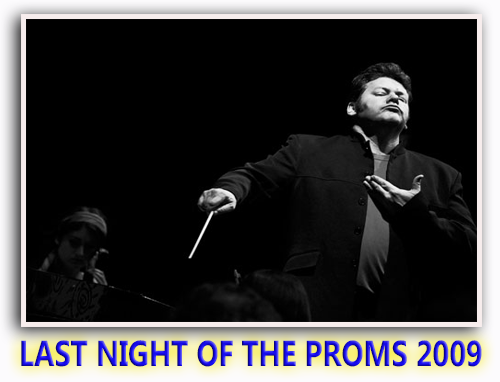
<style>
.page{position:relative;width:500px;height:382px;background:#000000}
.page>*{position:absolute;margin:0}
.t1{font:36px "MicrosoftPhagsPa-Bold";scale:0.81 1}
</style>
<div class="page">
<p class="t1" style="left:21px;top:340px;width:461px;height:27px">LAST NIGHT OF THE PROMS 2009</p>
</div>
